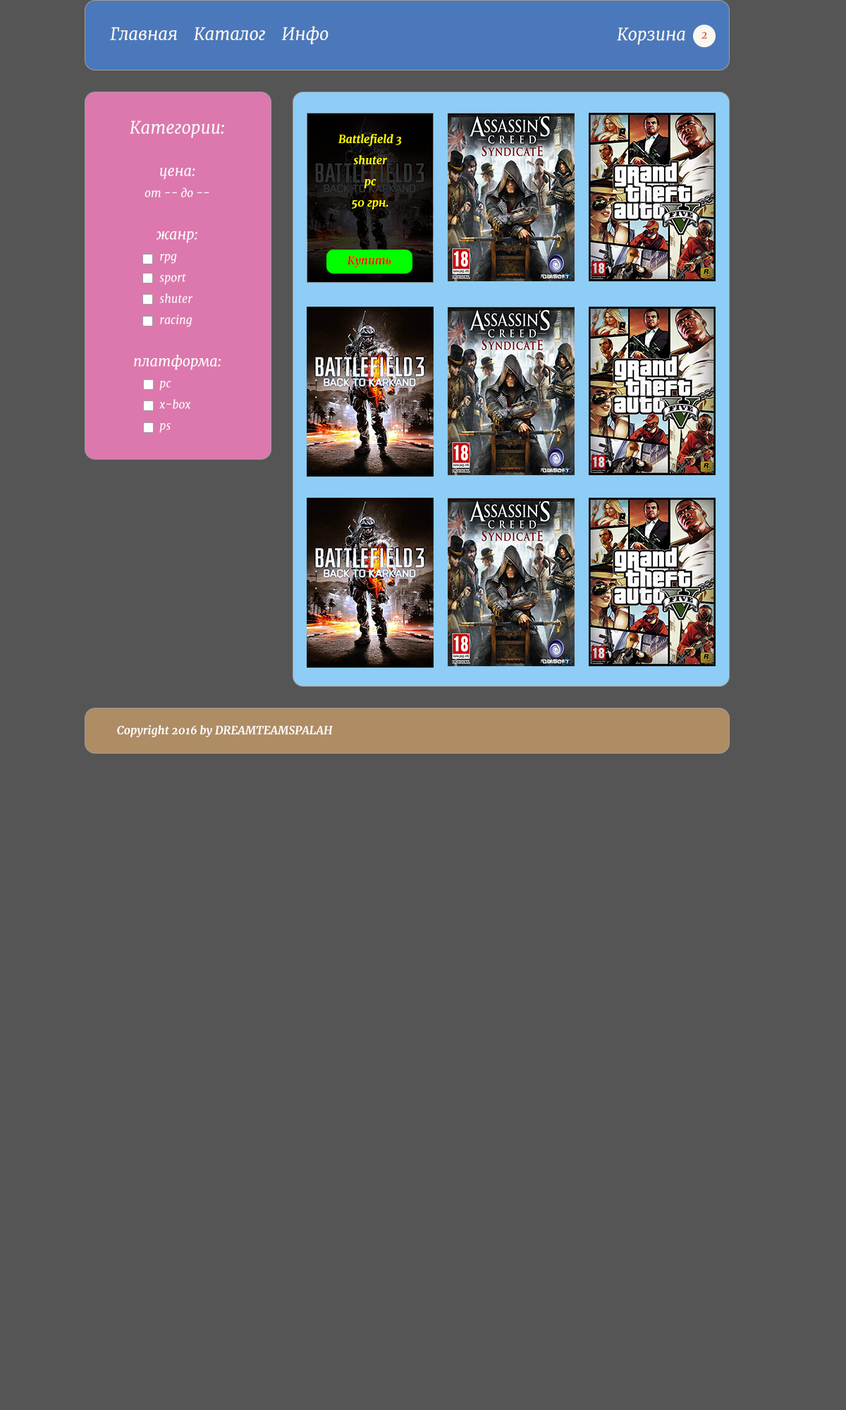
<style>
.page{position:relative;width:846px;height:1410px;background:#555555}
.page>*{position:absolute;margin:0}
.t1{font:16.9px "Merriweather-Italic";color:#faf7f0}
.t2{font:11.3px "Merriweather-Italic";color:#d24a43}
.t3{font:11.3px/21.1px "Merriweather-Italic";color:#fdfcfc}
.t4{font:16.9px/21.1px "Merriweather-Italic";color:#fbf9f9}
.t5{font:14.1px/21.1px "Merriweather-Italic";color:#fdfcfc}
.t6{font:11.3px/21.1px "Merriweather-BoldItalic";color:#ffff00}
.t7{font:11.3px/21.1px "Merriweather-BoldItalic";color:#ffffff}
.t8{font:11.3px "Merriweather-BoldItalic";color:#ff0000}
.t9{font:11.3px "Merriweather-BoldItalic";color:#ffffff}
</style>
<div class="page">
<p class="t1" style="left:110px;top:26px;width:218px;height:18px">Главная    Каталог    Инфо</p>
<p class="t1" style="left:617px;top:27px;width:68px;height:18px">Корзина</p>
<p class="t2" style="left:701px;top:32px;width:6px;height:7px">2</p>
<p class="t3" style="left:130px;top:121px;width:94px;height:312px;text-align:center"><span class="t4">Категории:<br><br></span><span class="t5">цена:<br></span>от -- до --<br><br><span class="t5">жанр:<br></span>  rpg<br>  sport<br>  shuter<br>  racing<br><br><span class="t5">платформа:<br></span>  pc<br>  x-box<br>  ps<br>wii</p>
<p class="t6" style="left:338px;top:134px;width:63px;height:75px;text-align:center"><span class="t7"><br></span>Battlefield 3<br>shuter<br>pc<br>50 грн.</p>
<p class="t8" style="left:347px;top:256px;width:44px;height:11px">Купить</p>
<p class="t9" style="left:117px;top:725px;width:216px;height:12px">Copyright 2016 by DREAMTEAMSPALAH</p>
</div>
